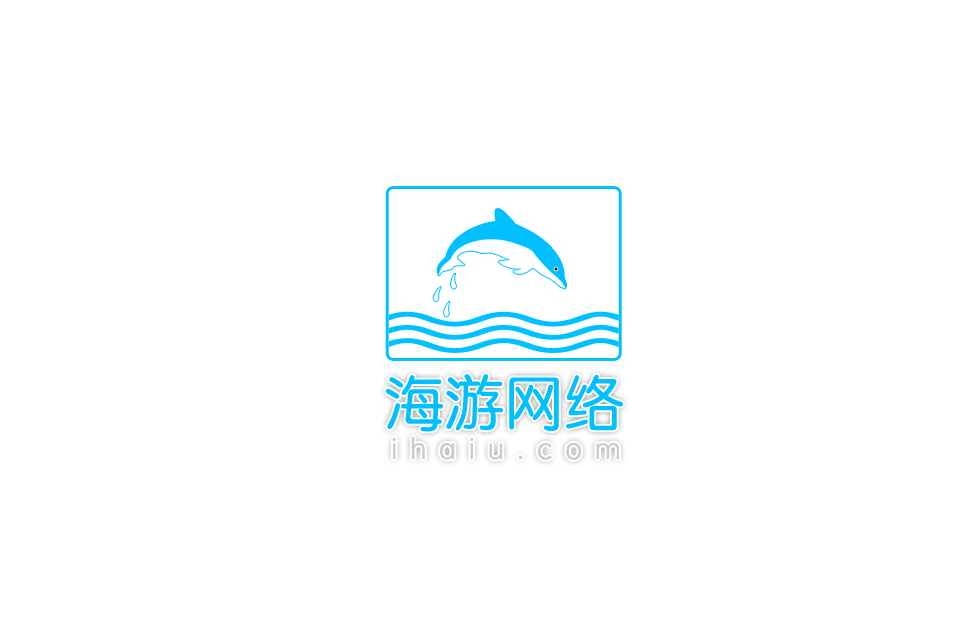
<style>
.page{position:relative;width:960px;height:640px;background:#ffffff}
.page>*{position:absolute;margin:0}
.t1{font:60px "STYuanti-SC-Regular";letter-spacing:0.005em;color:#00c0ff}
.t2{font:30px "STYuanti-SC-Regular";letter-spacing:0.425em;color:#cccccc}
</style>
<div class="page">
<p class="t1" style="left:385px;top:374px;width:238px;height:58px">海游网络</p>
<p class="t2" style="left:392px;top:436px;width:227px;height:24px">ihaiu.com</p>
</div>
